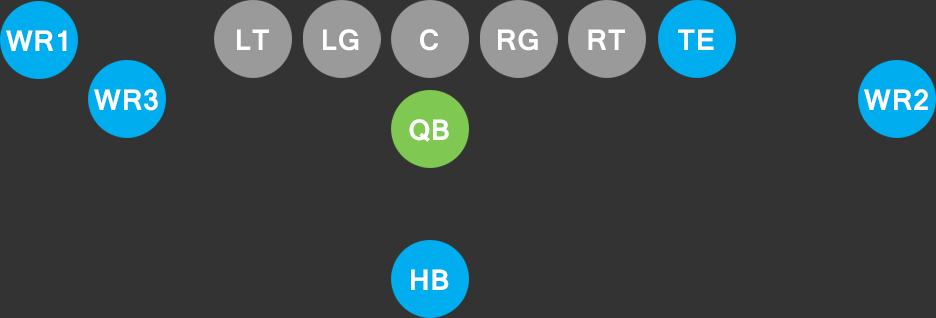
<style>
.page{position:relative;width:936px;height:318px;background:#333333}
.page>*{position:absolute;margin:0}
.t1{font:31.8px "Vrinda-Bold";color:#ffffff}
</style>
<div class="page">
<p class="t1" style="left:6px;top:30px;width:61px;height:21px">WR1</p>
<p class="t1" style="left:237px;top:29px;width:32px;height:21px">LT</p>
<p class="t1" style="left:323px;top:29px;width:36px;height:22px">LG</p>
<p class="t1" style="left:420px;top:29px;width:18px;height:22px">C</p>
<p class="t1" style="left:498px;top:29px;width:40px;height:22px">RG</p>
<p class="t1" style="left:588px;top:29px;width:37px;height:21px">RT</p>
<p class="t1" style="left:678px;top:29px;width:36px;height:21px">TE</p>
<p class="t1" style="left:94px;top:89px;width:64px;height:22px">WR3</p>
<p class="t1" style="left:864px;top:89px;width:64px;height:21px">WR2</p>
<p class="t1" style="left:409px;top:119px;width:40px;height:23px">QB</p>
<p class="t1" style="left:411px;top:269px;width:38px;height:21px">HB</p>
</div>
